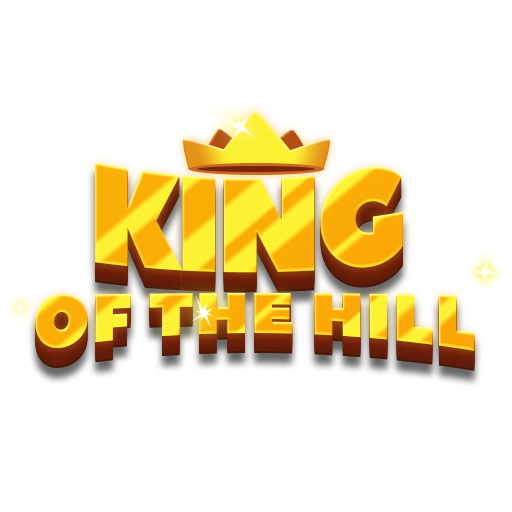
<style>
.page{position:relative;width:512px;height:512px;background:#ffffff}
.page>*{position:absolute;margin:0}
.t1{font:143.7px "PeaceSans";letter-spacing:-0.05em;scale:0.87 1}
.t2{font:76.7px "PeaceSans";letter-spacing:0.025em;scale:0.87 1}
</style>
<div class="page">
<p class="t1" style="left:95px;top:162px;width:308px;height:111px">KING</p>
<p class="t2" style="left:35px;top:293px;width:440px;height:58px">OF THE HILL</p>
</div>
